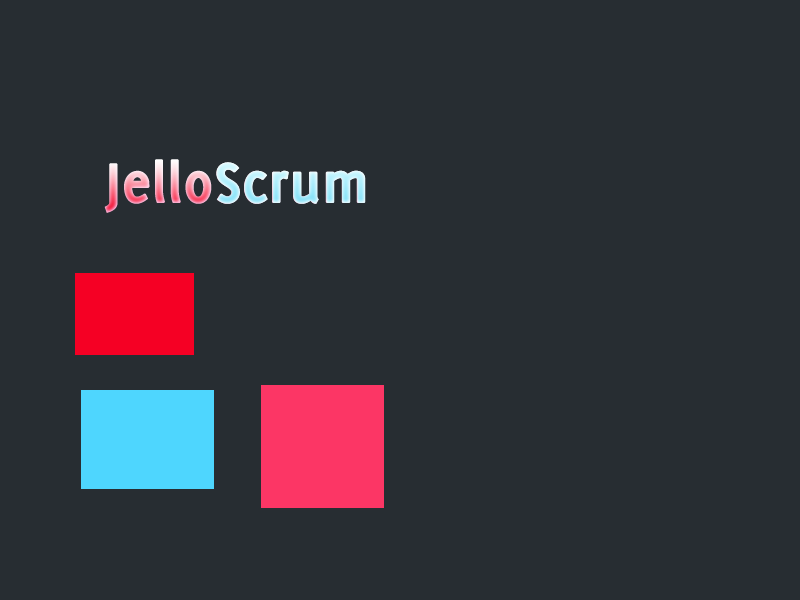
<style>
.page{position:relative;width:800px;height:600px;background:#272d32}
.page>*{position:absolute;margin:0}
.t1{font:60px "Delicious-Bold";font-weight:bold}
</style>
<div class="page">
<p class="t1" style="left:104px;top:159px;width:261px;height:54px">JelloScrum</p>
<p class="t1" style="left:216px;top:162px;width:150px;height:42px">Scrum</p>
</div>
